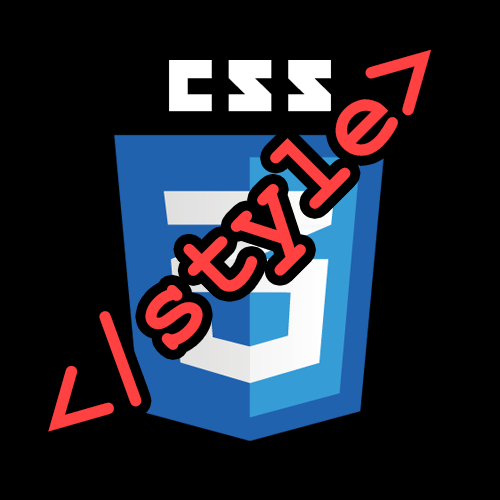
<style>
.page{position:relative;width:500px;height:500px;background:#000000}
.page>*{position:absolute;margin:0}
.t1{font:112px "CourierNewPS-BoldMT";color:#ff4141}
</style>
<div class="page">
<p class="t1" style="left:48px;top:49px;width:383px;height:383px;rotate:-45deg">&lt;/style&gt;</p>
</div>
